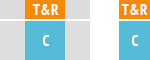
<style>
.page{position:relative;width:150px;height:60px;background:#56bbd7}
.page>*{position:absolute;margin:0}
.t1{font:15px "PTSans-NarrowBold";letter-spacing:0.04em;color:#ffffff}
</style>
<div class="page">
<p class="t1" style="left:32px;top:4px;width:27px;height:11px">T&amp;R</p>
<p class="t1" style="left:121px;top:4px;width:27px;height:11px">T&amp;R</p>
<p class="t1" style="left:42px;top:35px;width:8px;height:11px">C</p>
<p class="t1" style="left:131px;top:35px;width:8px;height:11px">C</p>
</div>
